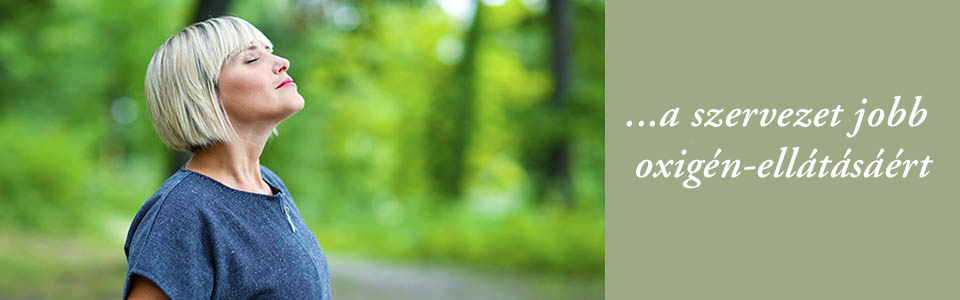
<style>
.page{position:relative;width:960px;height:300px;background:#9eaa86}
.page>*{position:absolute;margin:0}
.t1{font:42.4px "AGaramond-SemiboldItalic";letter-spacing:0.015em;color:#ffffff}
</style>
<div class="page">
<p class="t1" style="left:626px;top:95px;width:307px;height:94px;text-align:center">...a szervezet jobb<br> oxigén-ellátásáért</p>
</div>
